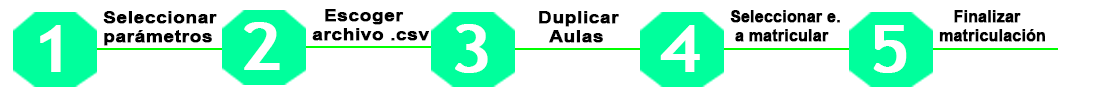
<style>
.page{position:relative;width:1100px;height:100px;background:#ffffff}
.page>*{position:absolute;margin:0}
.t1{font:15.6px "Arial-BoldMT";color:#000000;font-weight:bold;scale:1.23 1}
.t2{font:15.6px "Arial-BoldMT";color:#000000;font-weight:bold}
.t3{font:64.5px "TrebuchetMS";color:#ffffff;font-weight:bold;scale:1.16 1}
</style>
<div class="page">
<p class="t1" style="left:103px;top:11px;width:114px;height:35px">Seleccionar<br>parámetros</p>
<p class="t1" style="left:312px;top:9px;width:117px;height:32px">Escoger<br>archivo .csv</p>
<p class="t1" style="left:539px;top:11px;width:80px;height:32px">Duplicar<br>   Aulas</p>
<p class="t2" style="left:730px;top:10px;width:110px;height:32px">Seleccionar e.<br> a matricular</p>
<p class="t2" style="left:939px;top:10px;width:106px;height:32px">Finalizar <br>matriculación</p>
<p class="t3" style="left:40px;top:25px;width:21px;height:47px">1</p>
<p class="t3" style="left:244px;top:22px;width:36px;height:48px">2</p>
<p class="t3" style="left:455px;top:24px;width:33px;height:49px">3</p>
<p class="t3" style="left:660px;top:25px;width:40px;height:47px">4</p>
<p class="t3" style="left:873px;top:25px;width:34px;height:48px">5</p>
</div>
